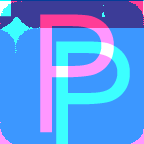
<style>
.page{position:relative;width:144px;height:144px;background:#3c97ff}
.page>*{position:absolute;margin:0}
.t1{font:164.1px "STHeitiSC-Light"}
</style>
<div class="page">
<p class="t1" style="left:40px;top:13px;width:74px;height:119px">P</p>
</div>
